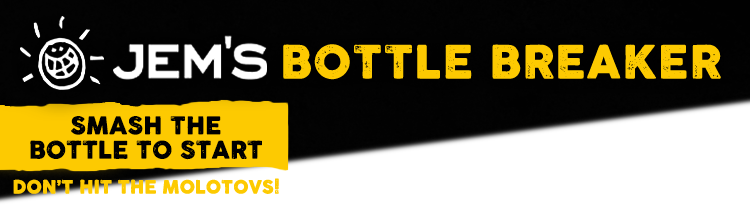
<style>
.page{position:relative;width:750px;height:214px;background:#ffffff}
.page>*{position:absolute;margin:0}
.t1{font:45.1px "COCOGOOSELETTERPRESS";letter-spacing:0.025em;color:#fdca01;text-transform:uppercase}
.t2{font:24px/17px "COCOGOOSELETTERPRESS";color:#000000;text-transform:uppercase}
.t3{font:18.1px "COCOGOOSELETTERPRESS";color:#fdca01;text-transform:uppercase}
</style>
<div class="page">
<p class="t1" style="left:283px;top:44px;width:438px;height:36px">Bottle Breaker</p>
<p class="t2" style="left:30px;top:116px;width:232px;height:44px;text-align:center">Smash the<br>bottle to start</p>
<p class="t3" style="left:13px;top:178px;width:266px;height:16px">Don’t hit the Molotovs!</p>
</div>
